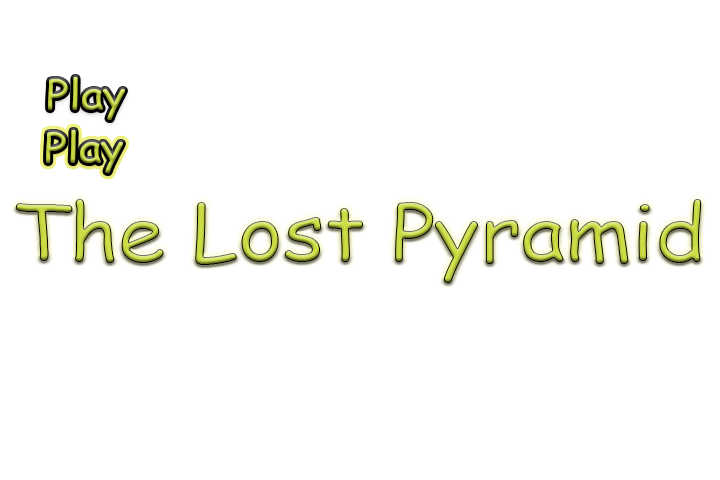
<style>
.page{position:relative;width:720px;height:480px;background:#ffffff}
.page>*{position:absolute;margin:0}
.t1{font:40px "ComicSansMS";scale:1.1 1}
.t2{font:77.9px "ComicSansMS";scale:1.1 1}
</style>
<div class="page">
<p class="t1" style="left:48px;top:77px;width:77px;height:43px">Play</p>
<p class="t2" style="left:15px;top:199px;width:687px;height:84px">The Lost Pyramid</p>
</div>
